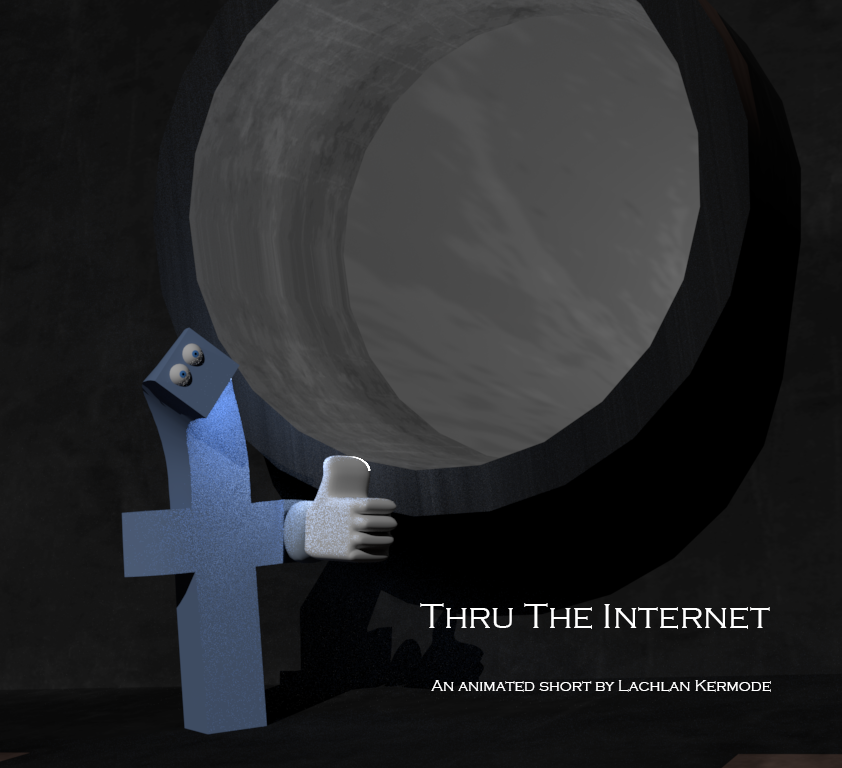
<style>
.page{position:relative;width:842px;height:768px}
.page>*{position:absolute;margin:0}
.t1{font:16px "CopperplateGothic-Light";color:#ffffff}
.t2{font:36px "CopperplateGothic-Light";color:#ffffff}
</style>
<div class="page">
<p class="t1" style="left:420px;top:603px;width:351px;height:89px;text-align:right"><span class="t2">Thru The Internet<br><br></span>An animated short by Lachlan Kermode</p>
</div>
